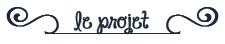
<style>
.page{position:relative;width:225px;height:44px;background:#ffffff}
.page>*{position:absolute;margin:0}
.t1{font:37.7px "Nymphette";color:#1b2838;font-weight:bold}
.t2{font:16px "JandaHappyDay";color:#1b2838;font-weight:bold}
</style>
<div class="page">
<p class="t1" style="left:6px;top:7px;width:53px;height:27px">y</p>
<p class="t2" style="left:73px;top:10px;width:76px;height:25px">le projet</p>
<p class="t1" style="left:166px;top:7px;width:53px;height:27px;rotate:180deg">y</p>
</div>
